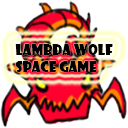
<style>
.page{position:relative;width:128px;height:128px;background:#ffffff}
.page>*{position:absolute;margin:0}
.t1{font:14px "ShowcardGothic-Reg";color:#000000}
</style>
<div class="page">
<p class="t1" style="left:15px;top:44px;width:98px;height:28px">Lambda Wolf<br>Space Game</p>
</div>
